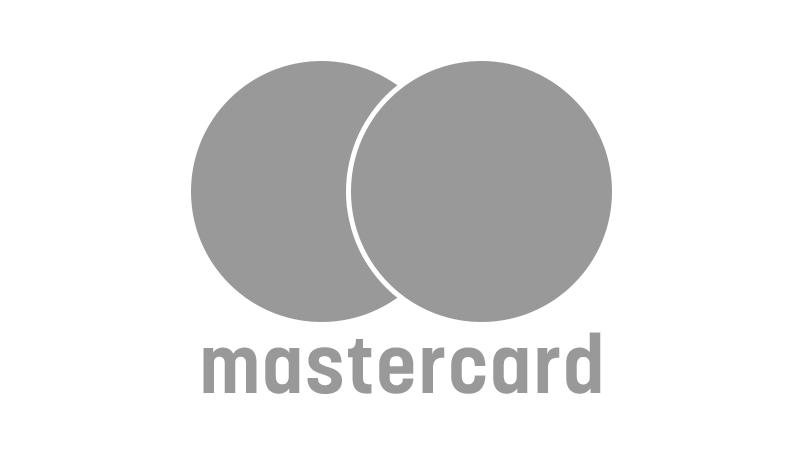
<style>
.page{position:relative;width:800px;height:450px;background:#ffffff}
.page>*{position:absolute;margin:0}
.t1{font:80px "KorolevW01-Bold";letter-spacing:0.02em;color:#999999}
</style>
<div class="page">
<p class="t1" style="left:203px;top:332px;width:398px;height:62px">mastercard</p>
</div>
